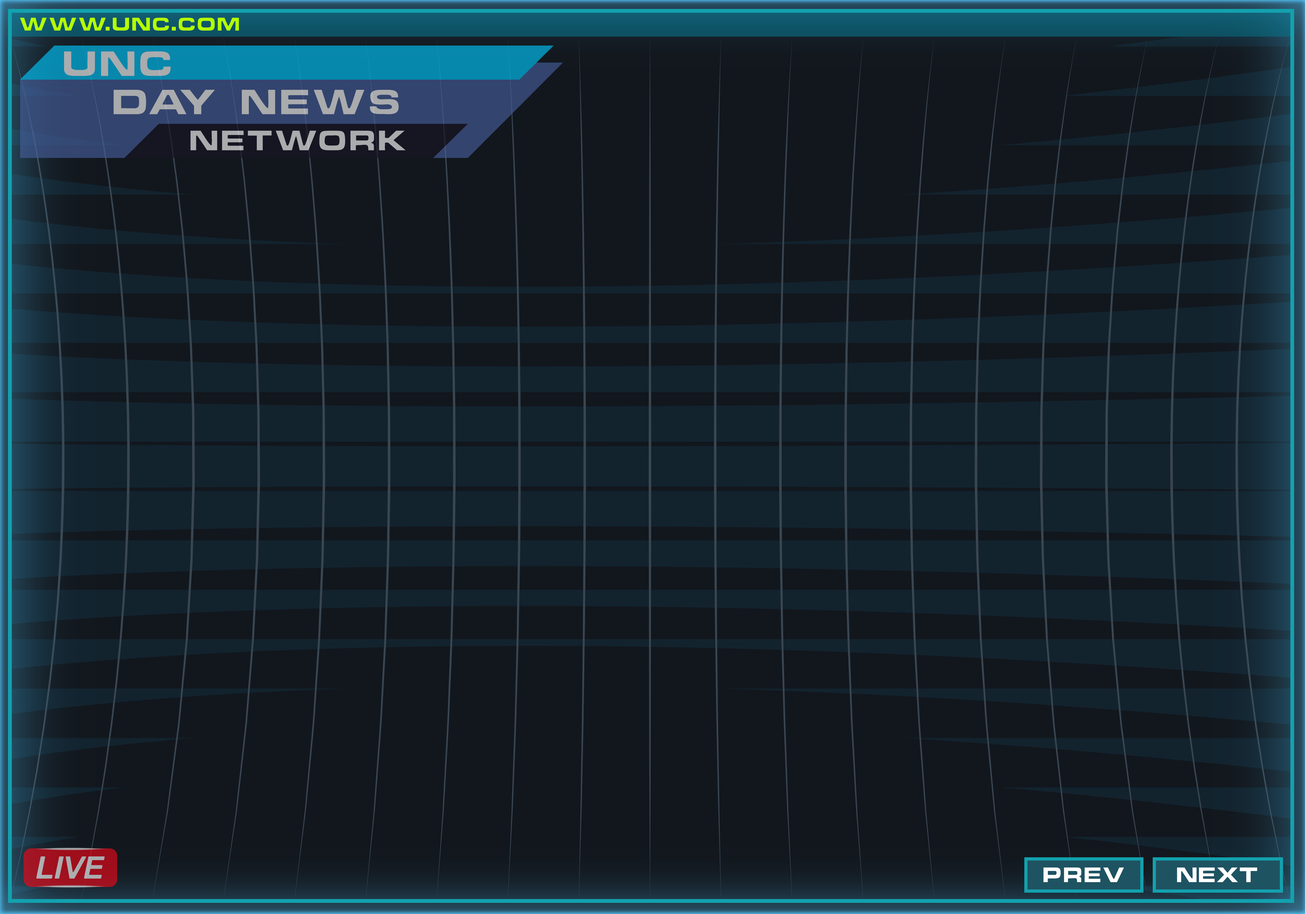
<style>
.page{position:relative;width:1305px;height:914px;background:#12171d}
.page>*{position:absolute;margin:0}
.t1{font:16.8px "ChinoCapsSSK";letter-spacing:0.12em;color:#b4ff00}
.t2{font:31.9px "ChinoCapsSSK";letter-spacing:0.12em;color:#a9acae}
.t3{font:31.9px "ChinoCapsSSK";letter-spacing:0.12em;color:#a9abad}
.t4{font:25.6px "ChinoCapsSSK";letter-spacing:0.12em;color:#a9abad}
.t5{font:19.2px "ChinoCapsSSK";letter-spacing:0.1em;color:#ffffff}
.t6{font:19.2px "ChinoCapsSSK";letter-spacing:0.06em;color:#ffffff}
</style>
<div class="page">
<p class="t1" style="left:20px;top:18px;width:219px;height:13px">WWW.UNC.COM</p>
<p class="t2" style="left:64px;top:51px;width:107px;height:25px">UNC</p>
<p class="t3" style="left:113px;top:90px;width:286px;height:24px">DAY NEWS</p>
<p class="t4" style="left:190px;top:131px;width:215px;height:19px">NETWORK</p>
<p class="t5" style="left:1043px;top:868px;width:81px;height:14px">PREV</p>
<p class="t6" style="left:1177px;top:868px;width:80px;height:14px">NEXT</p>
</div>
